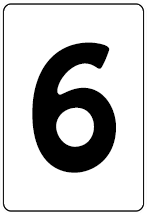
<style>
.page{position:relative;width:147px;height:213px;background:#ffffff}
.page>*{position:absolute;margin:0}
.t1{font:154.6px "HoboStd";color:#000000;scale:1.05 1}
</style>
<div class="page">
<p class="t1" style="left:32px;top:42px;width:84px;height:131px">6</p>
</div>
